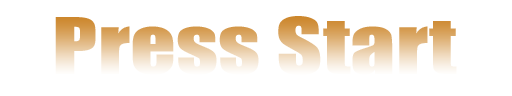
<style>
.page{position:relative;width:512px;height:96px;background:#ffffff}
.page>*{position:absolute;margin:0}
.t1{font:72px "Impact";scale:1.25 1}
</style>
<div class="page">
<p class="t1" style="left:55px;top:16px;width:402px;height:60px">Press Start</p>
</div>
